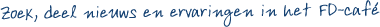
<style>
.page{position:relative;width:380px;height:27px;background:#ffffff}
.page>*{position:absolute;margin:0}
.t1{font:18px "ArdleysHand-Plain";color:#154273}
</style>
<div class="page">
<p class="t1" style="left:0px;top:0px;width:380px;height:27px;rotate:-1deg">Zoek, deel nieuws en ervaringen in het FD-café</p>
</div>
